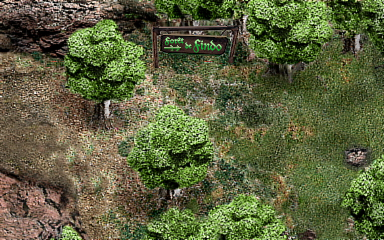
<style>
.page{position:relative;width:384px;height:240px}
.page>*{position:absolute;margin:0}
.t1{font:8px "DucDeBerry";scale:1.25 1}
.t2{font:13.3px "DucDeBerry"}
.t3{font:8px "DucDeBerry";color:#a3e3a4}
</style>
<div class="page">
<p class="t1" style="left:165px;top:37px;width:19px;height:9px">Forêt</p>
<p class="t2" style="left:193px;top:39px;width:29px;height:14px;rotate:4deg">Findo</p>
<p class="t3" style="left:185px;top:42px;width:7px;height:7px">de</p>
</div>
